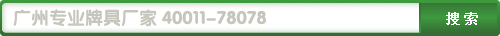
<style>
.page{position:relative;width:500px;height:36px;background:#ffffff}
.page>*{position:absolute;margin:0}
.t1{font:18px "FZY4JW--GB1-0";color:#c6c6bc}
</style>
<div class="page">
<p class="t1" style="left:13px;top:9px;width:253px;height:18px">广州专业牌具厂家 40011-78078</p>
</div>
